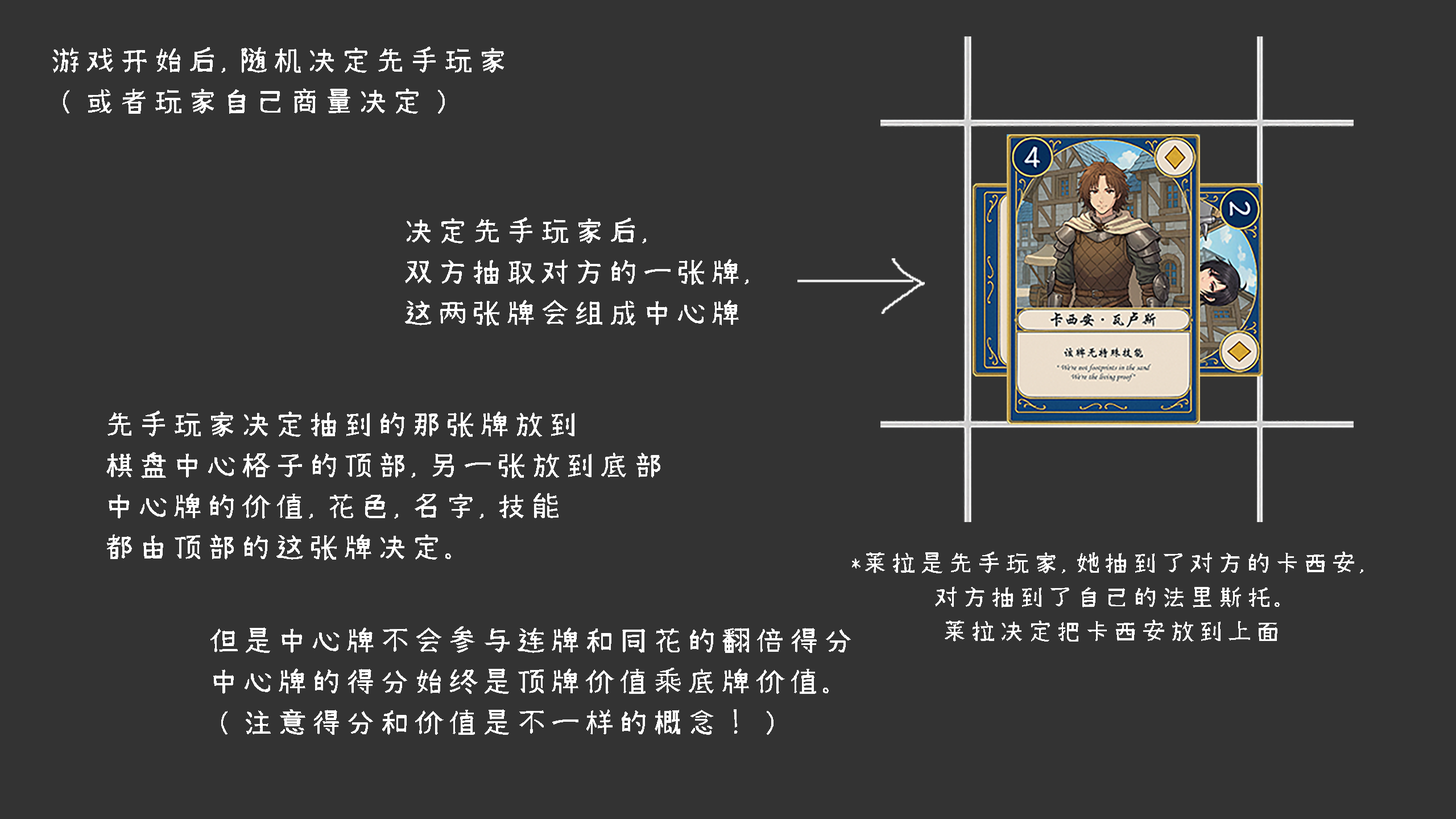
<style>
.page{position:relative;width:1456px;height:819px;background:#333333}
.page>*{position:absolute;margin:0}
.t1{font:34.1px "Xim-Sans-Brahmic";color:#ffffff}
.t2{font:28.4px "Xim-Sans-Brahmic";color:#ffffff}
</style>
<div class="page">
<p class="t1" style="left:52px;top:47px;width:452px;height:67px">游戏开始后，随机决定先手玩家<br>（或者玩家自己商量决定）</p>
<p class="t1" style="left:405px;top:217px;width:343px;height:109px">决定先手玩家后，<br>双方抽取对方的一张牌，<br>这两张牌会组成中心牌</p>
<p class="t1" style="left:106px;top:411px;width:554px;height:149px">先手玩家决定抽到的那张牌放到<br>棋盘中心格子的顶部，另一张放到底部<br>中心牌的价值，花色，名字，技能<br>都由顶部的这张牌决定。</p>
<p class="t2" style="left:852px;top:551px;width:511px;height:91px;text-align:center">*莱拉是先手玩家，她抽到了对方的卡西安，<br>对方抽到了自己的法里斯托。<br>莱拉决定把卡西安放到上面</p>
<p class="t1" style="left:210px;top:626px;width:641px;height:109px">但是中心牌不会参与连牌和同花的翻倍得分<br>中心牌的得分始终是顶牌价值乘底牌价值。<br>（注意得分和价值是不一样的概念！）</p>
</div>
